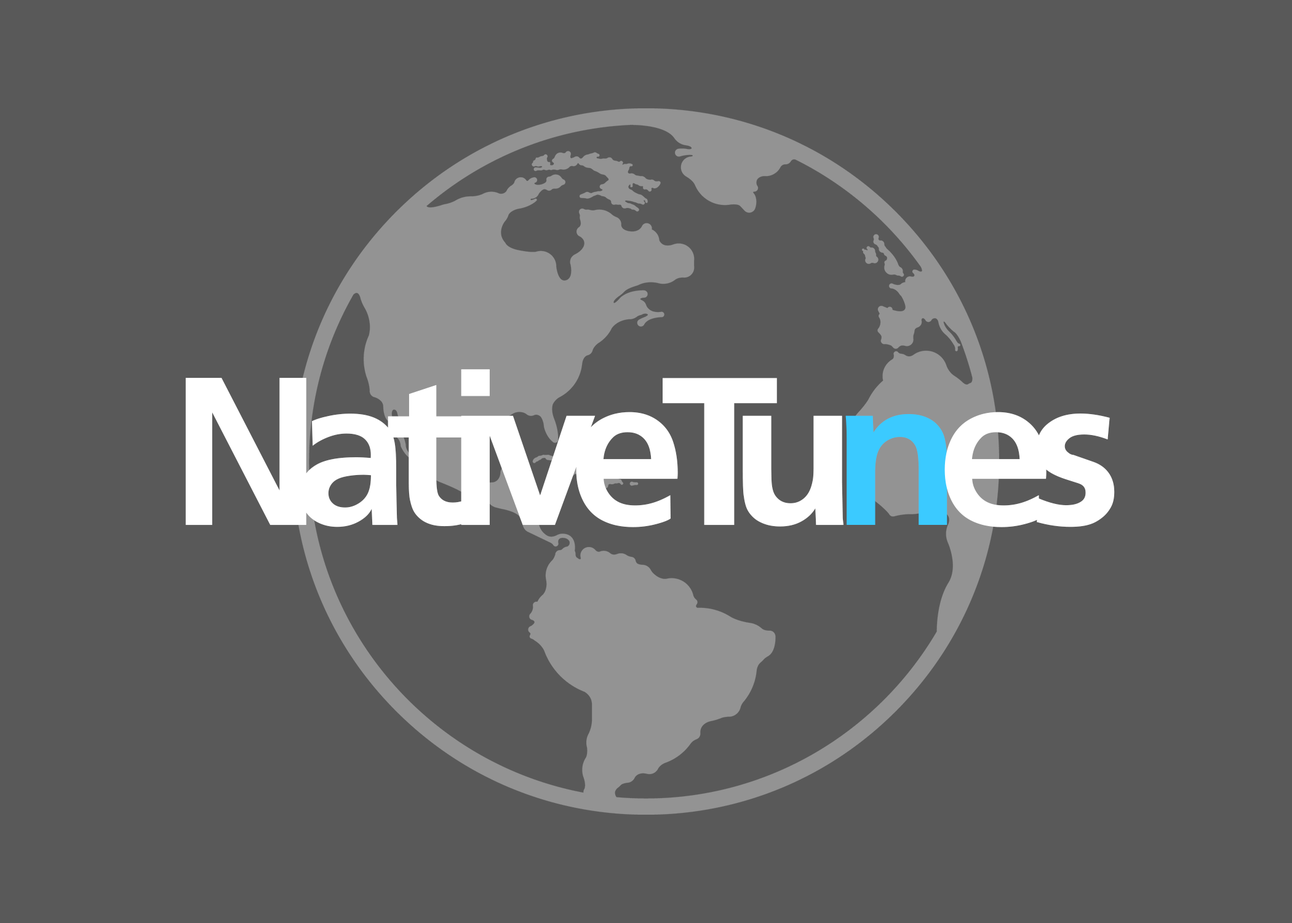
<style>
.page{position:relative;width:1292px;height:923px;background:#595959}
.page>*{position:absolute;margin:0}
.t1{font:211.5px "Frutiger-Bold";letter-spacing:-0.12em;color:#ffffff}
.t2{font:211.5px "Frutiger-Bold";letter-spacing:-0.12em;color:#3bcaff}
</style>
<div class="page">
<p class="t1" style="left:185px;top:369px;width:930px;height:158px">NativeTu<span class="t2">n</span>es</p>
</div>
